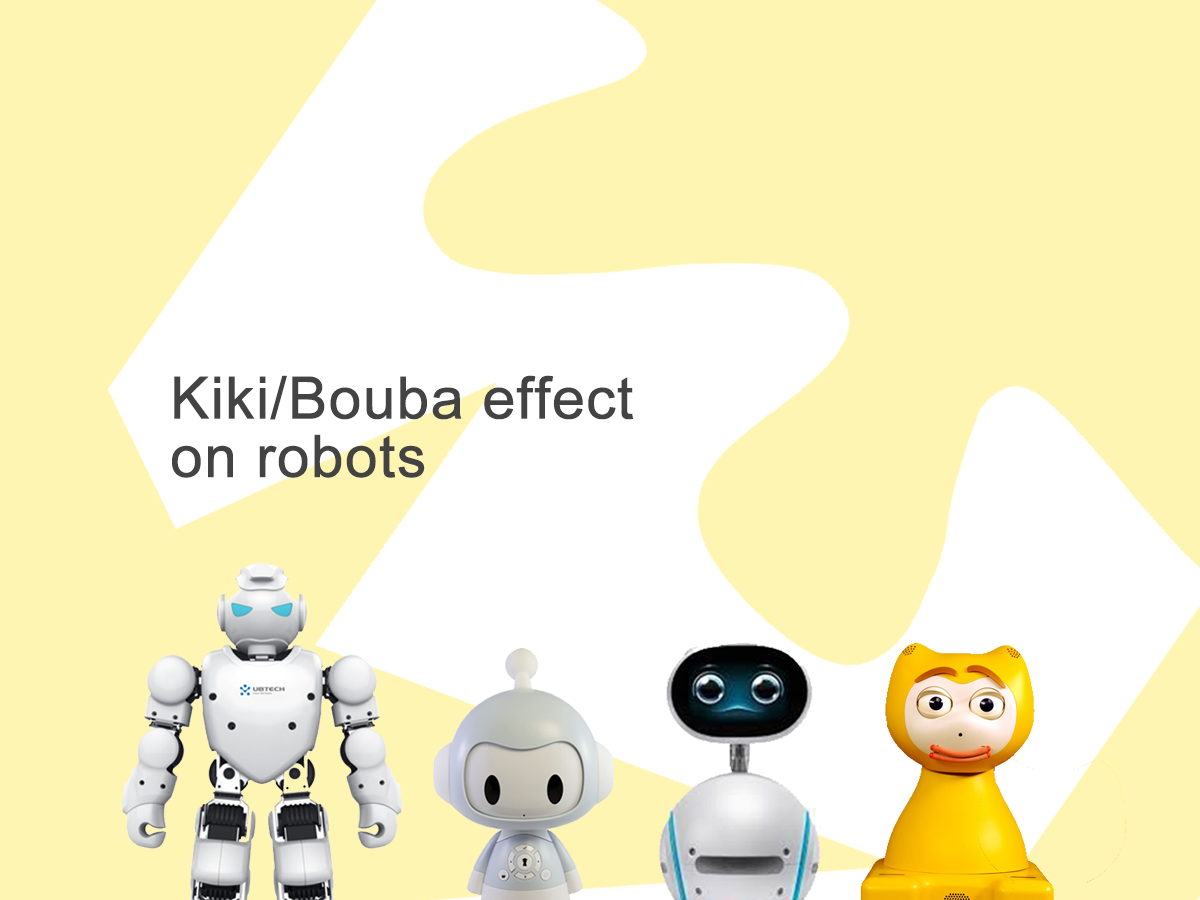
<style>
.page{position:relative;width:1200px;height:900px;background:#fff5b2}
.page>*{position:absolute;margin:0}
.t1{font:58.3px/58.3px "ArialMT";color:#444343;font-weight:bold}
</style>
<div class="page">
<p class="t1" style="left:172px;top:375px;width:461px;height:103px">Kiki/Bouba effect <br>on robots</p>
</div>
